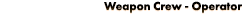
<style>
.page{position:relative;width:243px;height:15px;background:#ffffff}
.page>*{position:absolute;margin:0}
.t1{font:12px "FuturaPT-Heavy";color:#000000}
</style>
<div class="page">
<p class="t1" style="left:104px;top:1px;width:138px;height:12px">Weapon Crew - Operator</p>
</div>
